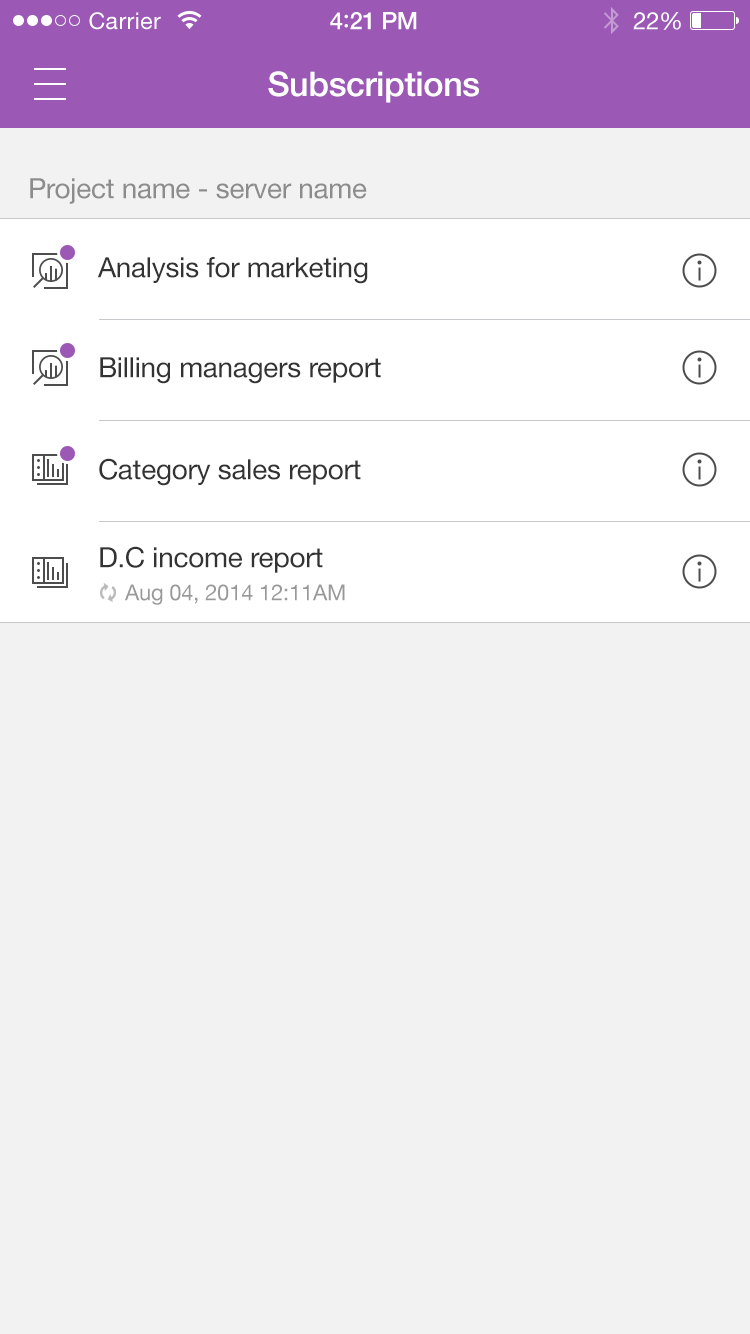
<style>
.page{position:relative;width:750px;height:1334px;background:#f2f2f2}
.page>*{position:absolute;margin:0}
.t1{font:23px "HelveticaNeue";letter-spacing:0.02em;color:#ffffff}
.t2{font:24px "HelveticaNeue-Medium";letter-spacing:-0.02em;color:#ffffff}
.t3{font:26px "Avenir-Medium";letter-spacing:-0.02em;color:#ffffff}
.t4{font:24px "HelveticaNeue";letter-spacing:-0.02em;color:#ffffff}
.t5{font:34px "HelveticaNeue-Medium";letter-spacing:-0.01em;color:#ffffff}
.t6{font:28px "HelveticaNeue";letter-spacing:-0.01em;color:#8c8c8c}
.t7{font:28px "HelveticaNeue";letter-spacing:-0.01em;color:#333333}
.t8{font:22px "HelveticaNeue";letter-spacing:-0.01em;color:#999999}
</style>
<div class="page">
<p class="t1" style="left:89px;top:12px;width:72px;height:18px">Carrier</p>
<p class="t2" style="left:330px;top:12px;width:87px;height:18px">4<span class="t3">:</span>21 PM</p>
<p class="t4" style="left:633px;top:12px;width:48px;height:18px">22%</p>
<p class="t5" style="left:268px;top:71px;width:211px;height:32px">Subscriptions</p>
<p class="t6" style="left:30px;top:178px;width:337px;height:26px">Project name - server name</p>
<p class="t7" style="left:97px;top:257px;width:271px;height:27px">Analysis for marketing</p>
<p class="t7" style="left:100px;top:357px;width:281px;height:27px">Billing managers report</p>
<p class="t7" style="left:99px;top:458px;width:262px;height:28px">Category sales report</p>
<p class="t7" style="left:100px;top:546px;width:223px;height:27px">D.C income report</p>
<p class="t8" style="left:124px;top:584px;width:221px;height:21px">Aug 04, 2014 12:11AM</p>
</div>
